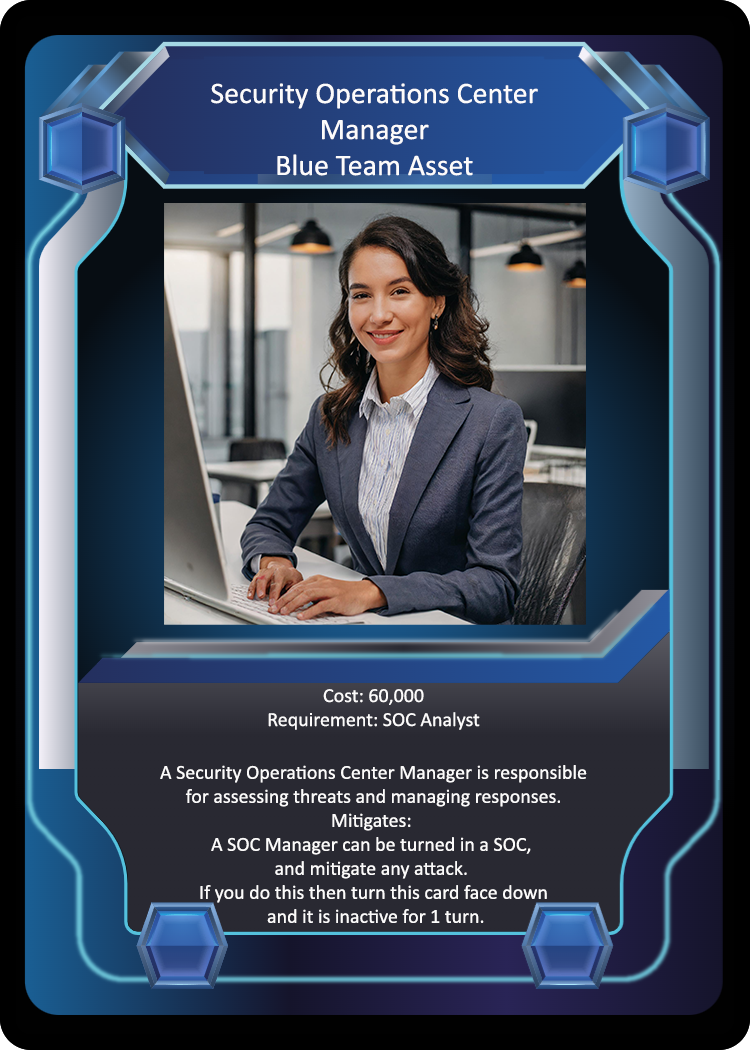
<style>
.page{position:relative;width:750px;height:1050px}
.page>*{position:absolute;margin:0}
.t1{font:30px "Calibri";color:#fcfbfb}
.t2{font:20px "Calibri";color:#fcfbfb}
</style>
<div class="page">
<p class="t1" style="left:211px;top:83px;width:327px;height:93px;text-align:center">Security Operations Center<br>Manager<br>Blue Team Asset</p>
<p class="t2" style="left:160px;top:689px;width:427px;height:234px;text-align:center">Cost: 60,000<br>Requirement: SOC Analyst<br><br>A Security Operations Center Manager is responsible<br>for assessing threats and managing responses.<br>Mitigates: <br>A SOC Manager can be turned in a SOC, <br>and mitigate any attack. <br>If you do this then turn this card face down<br> and it is inactive for 1 turn.</p>
</div>
